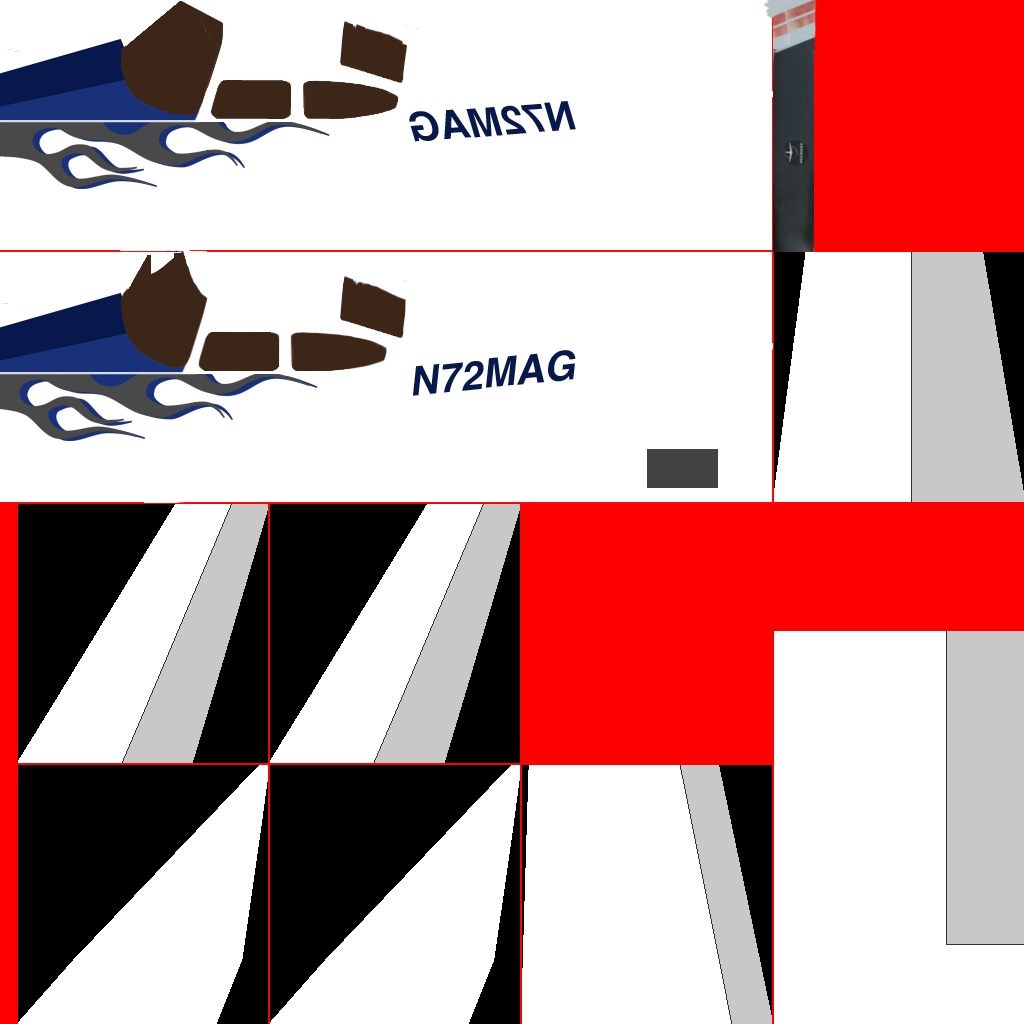
<style>
.page{position:relative;width:1024px;height:1024px;background:#ffffff}
.page>*{position:absolute;margin:0}
.t1{font:40px "Helvetica-BoldOblique";color:#07194b}
</style>
<div class="page">
<p class="t1" style="left:409px;top:101px;width:167px;height:41px;rotate:175deg">N72MAG</p>
<p class="t1" style="left:413px;top:350px;width:163px;height:46px;rotate:-6deg">N72MAG</p>
</div>
